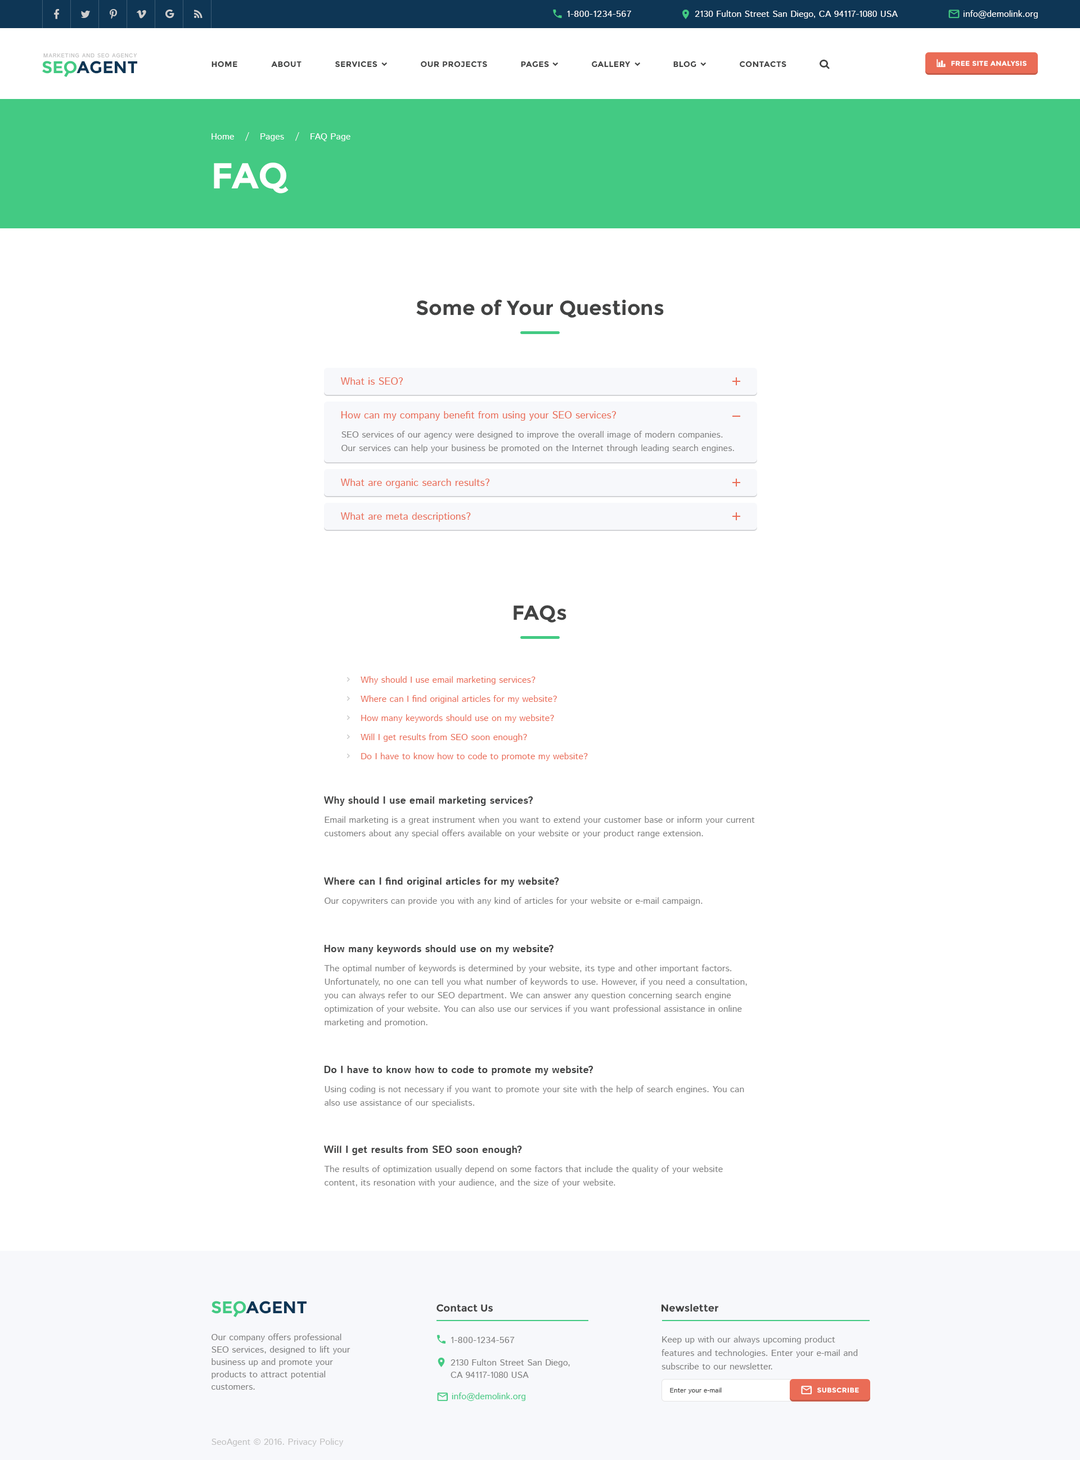
<style>
.page{position:relative;width:1080px;height:1460px;background:#ffffff}
.page>*{position:absolute;margin:0}
.t1{font:9px "IstokWeb-Regular";letter-spacing:0.04em;color:#ffffff;text-transform:uppercase}
.t2{font:9px "IstokWeb-Regular";color:#ffffff}
.t3{font:5.6px "IstokWeb-Regular";letter-spacing:0.08em;color:#c1c1c1;text-transform:uppercase}
.t4{font:16.9px "Montserrat-Bold";color:#43ca83}
.t5{font:16.9px "Montserrat-Bold";color:#0e3655}
.t6{font:7.9px "Montserrat-Bold";letter-spacing:0.04em;color:#424343;text-transform:uppercase}
.t7{font:6.7px "Montserrat-Bold";letter-spacing:0.04em;color:#ffffff;text-transform:uppercase}
.t8{font:36px "Montserrat-Bold";color:#ffffff}
.t9{font:20.2px "Montserrat-Bold";color:#424343}
.t10{font:10.1px "IstokWeb-Regular";color:#ea6c56}
.t11{font:9px/13.5px "IstokWeb-Regular";color:#7f7f7f}
.t12{font:9px/13.5px "IstokWeb-Regular";color:#ea6c56}
.t13{font:10.1px "IstokWeb-Bold";color:#424343}
.t14{font:9px "IstokWeb-Regular";color:#7f7f7f}
.t15{font:10.1px "Montserrat-Bold";color:#424343}
.t16{font:9px/12.4px "IstokWeb-Regular";color:#7f7f7f}
.t17{font:9px "IstokWeb-Regular";letter-spacing:0.04em;color:#7f7f7f;text-transform:uppercase}
.t18{font:9px "IstokWeb-Regular";color:#43ca83}
.t19{font:6.8px "IstokWeb-Regular";color:#424343}
.t20{font:9px "IstokWeb-Regular";color:#c0c0c0}
</style>
<div class="page">
<p class="t1" style="left:567px;top:11px;width:64px;height:6px">1-800-1234-567</p>
<p class="t2" style="left:695px;top:10px;width:203px;height:9px">2130 Fulton Street San Diego, CA 94117-1080 USA</p>
<p class="t2" style="left:964px;top:10px;width:74px;height:9px">info@demolink.org</p>
<p class="t3" style="left:43px;top:53px;width:94px;height:4px">Marketing and SEO agency</p>
<p class="t4" style="left:42px;top:61px;width:34px;height:13px">SEO</p>
<p class="t5" style="left:76px;top:61px;width:61px;height:13px">AGENT</p>
<p class="t6" style="left:212px;top:61px;width:25px;height:7px">Home</p>
<p class="t6" style="left:271px;top:61px;width:31px;height:7px">about</p>
<p class="t6" style="left:335px;top:61px;width:42px;height:7px">services</p>
<p class="t6" style="left:421px;top:61px;width:66px;height:7px">our projects</p>
<p class="t6" style="left:521px;top:61px;width:28px;height:7px">pages</p>
<p class="t6" style="left:592px;top:61px;width:39px;height:7px">gallery</p>
<p class="t6" style="left:673px;top:61px;width:23px;height:7px">blog</p>
<p class="t6" style="left:740px;top:61px;width:46px;height:7px">contacts</p>
<p class="t7" style="left:951px;top:61px;width:76px;height:5px">Free Site Analysis</p>
<p class="t2" style="left:212px;top:133px;width:22px;height:7px">Home</p>
<p class="t2" style="left:245px;top:132px;width:4px;height:9px">/</p>
<p class="t2" style="left:260px;top:133px;width:24px;height:8px">Pages</p>
<p class="t2" style="left:295px;top:132px;width:4px;height:9px">/</p>
<p class="t2" style="left:310px;top:133px;width:40px;height:8px">FAQ Page</p>
<p class="t8" style="left:214px;top:163px;width:75px;height:31px">FAQ</p>
<p class="t9" style="left:416px;top:299px;width:248px;height:19px">Some of Your Questions</p>
<p class="t10" style="left:341px;top:377px;width:62px;height:8px">What is SEO?</p>
<p class="t10" style="left:341px;top:411px;width:275px;height:10px">How can my company benefit from using your SEO services?</p>
<p class="t11" style="left:341px;top:431px;width:393px;height:22px">SEO services of our agency were designed to improve the overall image of modern companies. Our services can help your business be promoted on the Internet through leading search engines.</p>
<p class="t10" style="left:341px;top:479px;width:149px;height:9px">What are organic search results?</p>
<p class="t10" style="left:341px;top:512px;width:130px;height:10px">What are meta descriptions?</p>
<p class="t9" style="left:514px;top:605px;width:52px;height:18px">FAQs</p>
<p class="t12" style="left:361px;top:676px;width:227px;height:85px">Why should I use email marketing services?<br>Where can I find original articles for my website?<br>How many keywords should use on my website?<br>Will I get results from SEO soon enough?<br>Do I have to know how to code to promote my website?</p>
<p class="t13" style="left:324px;top:796px;width:209px;height:10px">Why should I use email marketing services?</p>
<p class="t11" style="left:325px;top:816px;width:430px;height:22px">Email marketing is a great instrument when you want to extend your customer base or inform your current customers about any special offers available on your website or your product range extension.</p>
<p class="t13" style="left:324px;top:878px;width:235px;height:9px">Where can I find original articles for my website?</p>
<p class="t14" style="left:325px;top:897px;width:378px;height:9px">Our copywriters can provide you with any kind of articles for your website or e-mail campaign.</p>
<p class="t13" style="left:324px;top:945px;width:230px;height:10px">How many keywords should use on my website?</p>
<p class="t11" style="left:324px;top:965px;width:423px;height:62px">The optimal number of keywords is determined by your website, its type and other important factors. Unfortunately, no one can tell you what number of keywords to use. However, if you need a consultation, you can always refer to our SEO department. We can answer any question concerning search engine optimization of your website. You can also use our services if you want professional assistance in online marketing and promotion.</p>
<p class="t13" style="left:324px;top:1066px;width:269px;height:10px">Do I have to know how to code to promote my website?</p>
<p class="t11" style="left:325px;top:1086px;width:419px;height:22px">Using coding is not necessary if you want to promote your site with the help of search engines. You can also use assistance of our specialists.</p>
<p class="t13" style="left:324px;top:1146px;width:198px;height:9px">Will I get results from SEO soon enough?</p>
<p class="t11" style="left:324px;top:1166px;width:399px;height:21px">The results of optimization usually depend on some factors that include the quality of your website content, its resonation with your audience, and the size of your website.</p>
<p class="t4" style="left:212px;top:1301px;width:34px;height:13px">SEO</p>
<p class="t5" style="left:246px;top:1301px;width:61px;height:13px">AGENT</p>
<p class="t15" style="left:436px;top:1304px;width:57px;height:8px">Contact Us</p>
<p class="t15" style="left:662px;top:1304px;width:56px;height:8px">Newsletter</p>
<p class="t16" style="left:212px;top:1334px;width:138px;height:56px">Our company offers professional SEO services, designed to lift your business up and promote your products to attract potential customers.</p>
<p class="t17" style="left:451px;top:1337px;width:64px;height:6px">1-800-1234-567</p>
<p class="t11" style="left:662px;top:1336px;width:196px;height:34px">Keep up with our always upcoming product features and technologies. Enter your e-mail and subscribe to our newsletter.</p>
<p class="t16" style="left:451px;top:1359px;width:119px;height:19px">2130 Fulton Street San Diego,<br>CA 94117-1080 USA</p>
<p class="t18" style="left:452px;top:1393px;width:73px;height:8px">info@demolink.org</p>
<p class="t19" style="left:670px;top:1388px;width:52px;height:6px">Enter your e-mail</p>
<p class="t7" style="left:817px;top:1388px;width:42px;height:5px">subscribe</p>
<p class="t20" style="left:212px;top:1438px;width:132px;height:9px">SeoAgent © 2016. Privacy Policy</p>
</div>
